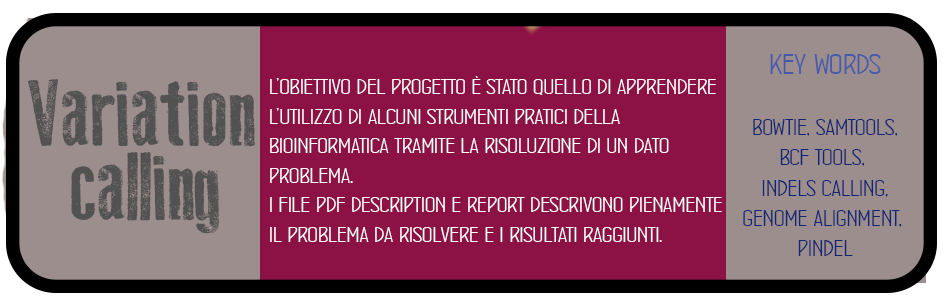
<style>
.page{position:relative;width:945px;height:302px;background:#8c1145}
.page>*{position:absolute;margin:0}
.t1{font:25.3px "ConcursoItalianBTNWide";color:#112672}
.t2{font:32px "ConcursoItalianBTNWide";color:#455baa}
.t3{font:26.7px "ConcursoItalianBTNWide";color:#112672}
.t4{font:24.7px "ConcursoItalianBTNWide";color:#ffffff}
.t5{font:93.3px "OldPress";color:#525252}
</style>
<div class="page">
<p class="t1" style="left:743px;top:54px;width:159px;height:202px;text-align:center"><span class="t2">key words<br></span><br>bowtie, samtools,<br>bcf tools, <br>indels calling,<br>genome alignment, <br>pindel<br><span class="t3"></span></p>
<p class="t4" style="left:270px;top:76px;width:452px;height:166px">l’obiettivo del progetto è stato quello di apprendere<br>l’utilizzo di alcuni strumenti pratici della <br>bioinformatica tramite la risoluzione di un dato <br>problema. <br>i file pdf description e report descrivono pienamente<br>il problema da risolvere e i risultati raggiunti.</p>
<p class="t5" style="left:28px;top:79px;width:227px;height:68px">Variation</p>
<p class="t5" style="left:71px;top:152px;width:148px;height:82px">calling</p>
</div>
